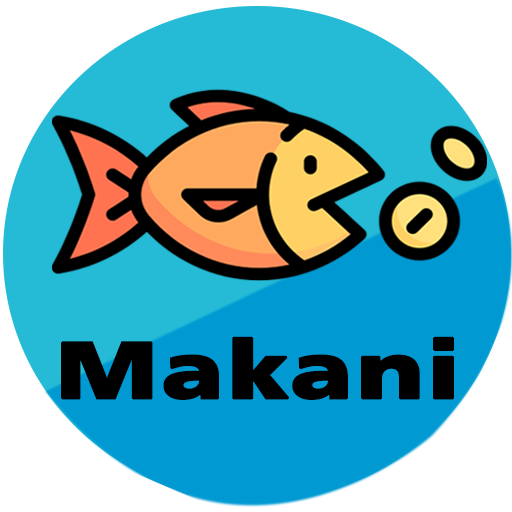
<style>
.page{position:relative;width:512px;height:512px;background:#25bbd6}
.page>*{position:absolute;margin:0}
.t1{font:80px "Humanist777BT-BlackB";color:#000000;font-weight:bold;scale:1.3 1}
</style>
<div class="page">
<p class="t1" style="left:61px;top:336px;width:393px;height:64px">Makani</p>
</div>
